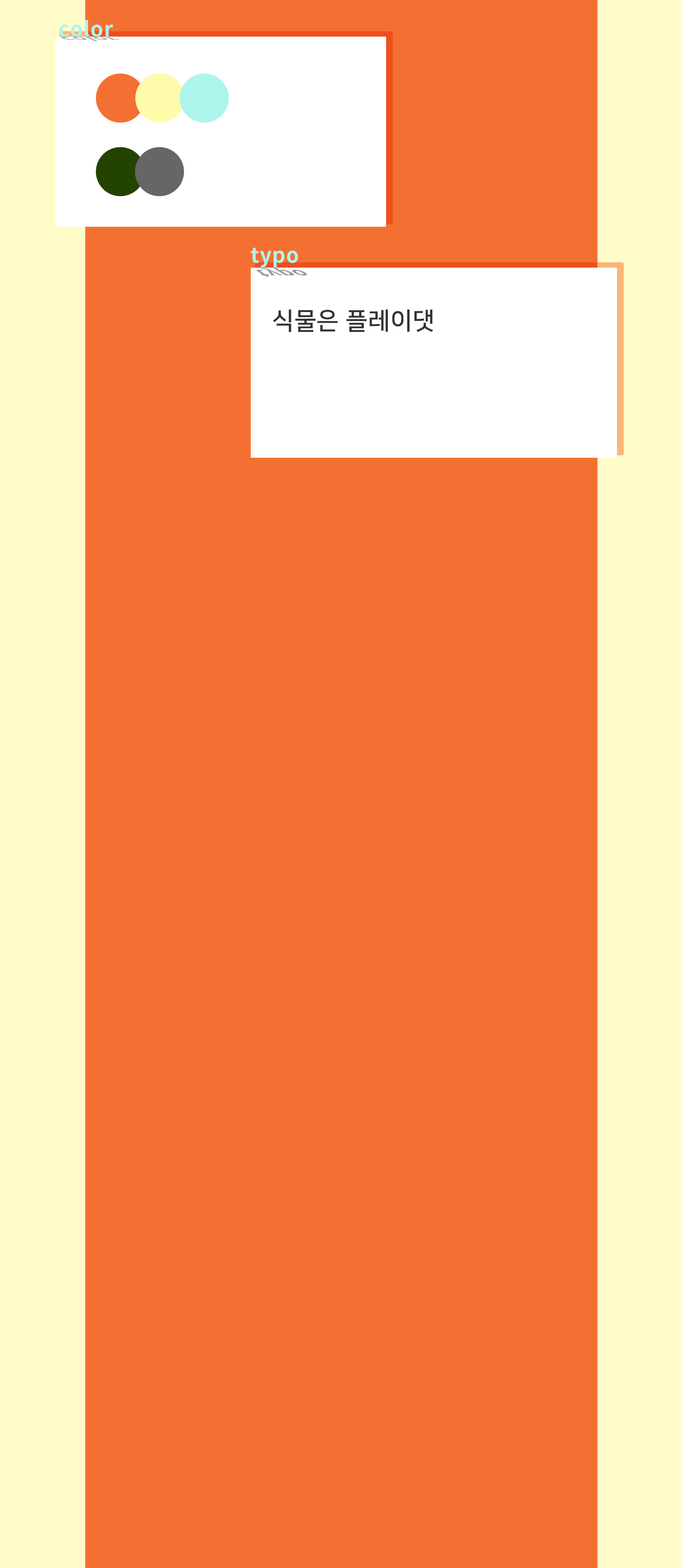
<style>
.page{position:relative;width:682px;height:1568px;background:#f37032}
.page>*{position:absolute;margin:0}
.t1{font:21px "NotoSansKR-Bold";letter-spacing:0.02em;color:#adf5ec}
.t2{font:24.1px "NanumSquareB";letter-spacing:0.02em;color:#333333}
</style>
<div class="page">
<p class="t1" style="left:59px;top:20px;width:54px;height:17px">color</p>
<p class="t1" style="left:251px;top:248px;width:47px;height:20px">typo</p>
<p class="t2" style="left:273px;top:310px;width:160px;height:22px">식물은 플레이댓</p>
</div>
